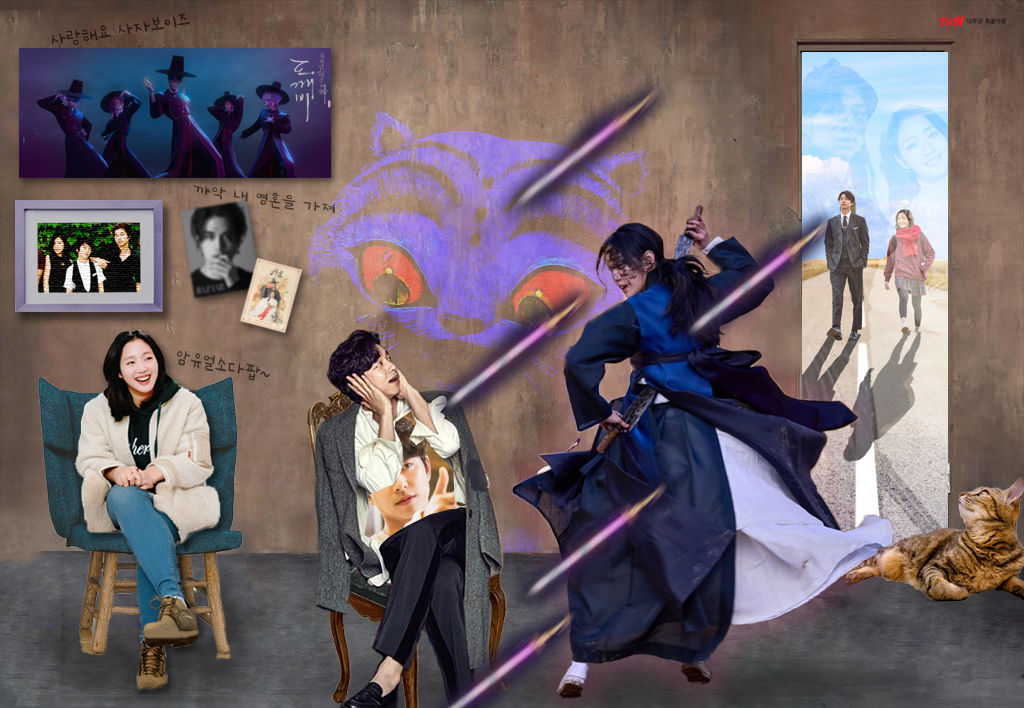
<style>
.page{position:relative;width:1024px;height:708px}
.page>*{position:absolute;margin:0}
.t1{font:23.3px "NanumJangMiCe";color:#271b16}
.t2{font:18.9px "NanumJangMiCe";color:#43342b;scale:1.26 1}
.t3{font:23px "NanumJangMiCe";color:#3c2f27}
</style>
<div class="page">
<p class="t1" style="left:51px;top:13px;width:139px;height:33px;rotate:-9deg">사랑해요 사자보이즈</p>
<p class="t2" style="left:193px;top:185px;width:142px;height:29px;rotate:8deg">꺄악 내 영혼을 가져</p>
<p class="t3" style="left:176px;top:351px;width:94px;height:30px;rotate:11deg">암유얼소다팝~</p>
</div>
